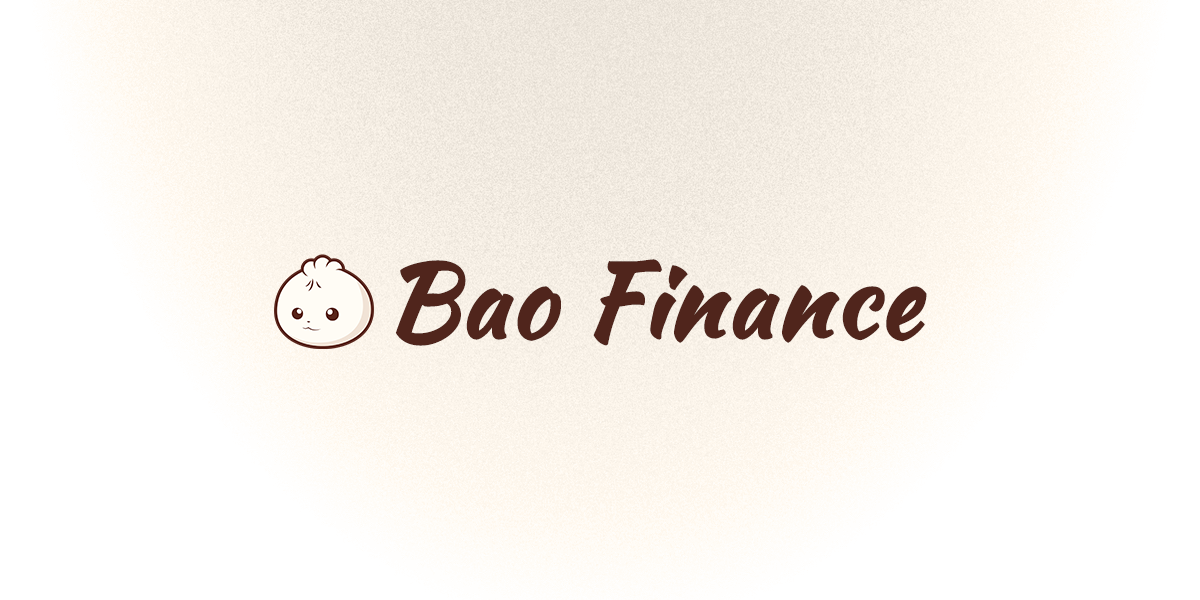
<style>
.page{position:relative;width:1200px;height:600px;background:#ffffff}
.page>*{position:absolute;margin:0}
.t1{font:101.5px "KaushanScript-Regular";color:#50251c;font-weight:bold}
</style>
<div class="page">
<p class="t1" style="left:395px;top:259px;width:532px;height:87px">Bao Finance</p>
</div>
